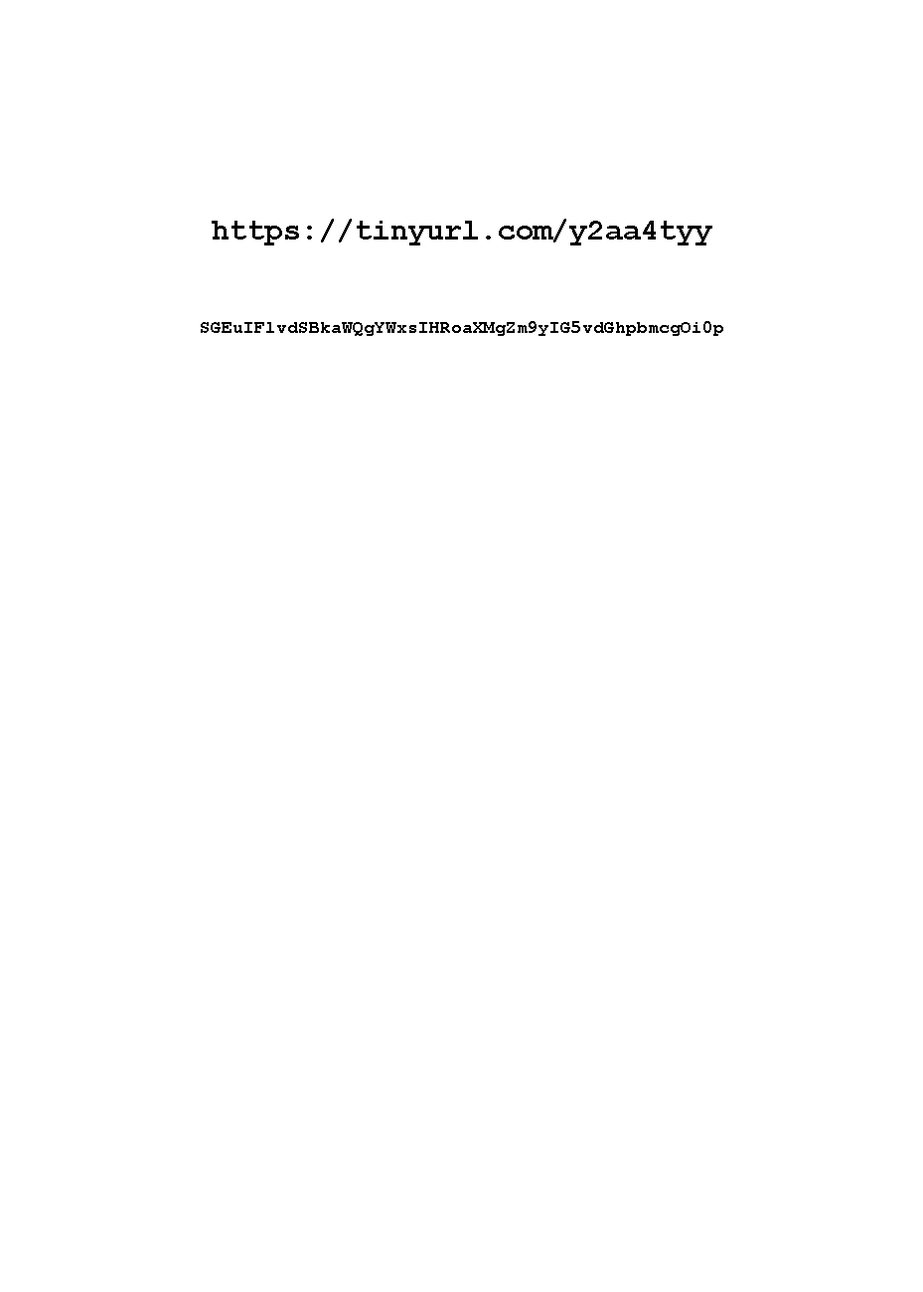
<style>
.page{position:relative;width:923px;height:1292px;background:#ffffff}
.page>*{position:absolute;margin:0}
.t1{font:17.9px "CourierNewPS-BoldMT";color:#000000}
.t2{font:29.8px "CourierNewPS-BoldMT";color:#000000}
</style>
<div class="page">
<p class="t1" style="left:201px;top:219px;width:522px;height:117px;text-align:center"><span class="t2">https://tinyurl.com/y2aa4tyy<br><br><br></span>SGEuIFlvdSBkaWQgYWxsIHRoaXMgZm9yIG5vdGhpbmcgOi0p</p>
</div>
